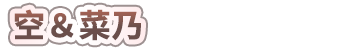
<style>
.page{position:relative;width:360px;height:50px;background:#ffffff}
.page>*{position:absolute;margin:0}
.t1{font:32px "SourceHanSansSC-Bold";font-weight:bold}
</style>
<div class="page">
<p class="t1" style="left:14px;top:9px;width:127px;height:32px">空＆菜乃</p>
</div>
